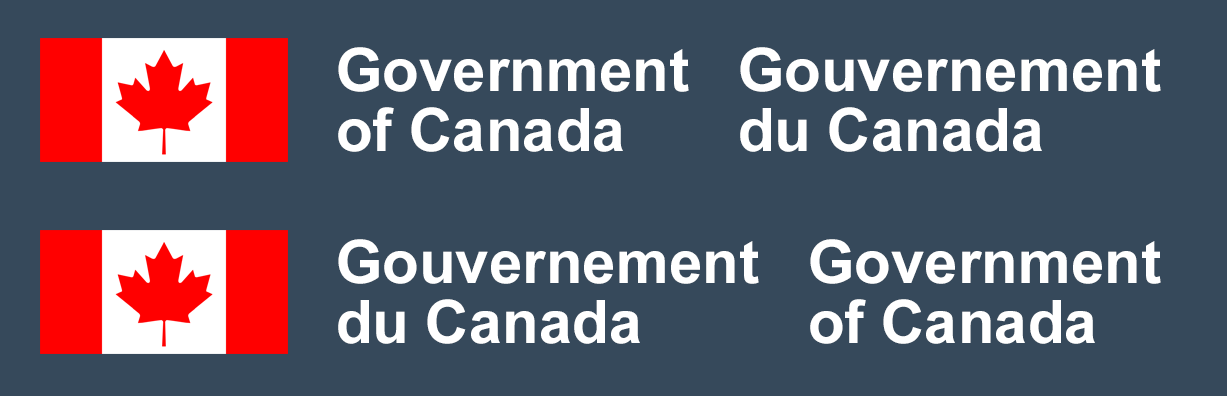
<style>
.page{position:relative;width:1227px;height:396px;background:#36495b}
.page>*{position:absolute;margin:0}
.t1{font:60px/60px "Arial-BoldMT";color:#ffffff}
</style>
<div class="page">
<p class="t1" style="left:338px;top:47px;width:351px;height:105px">Government<br>of Canada</p>
<p class="t1" style="left:740px;top:47px;width:421px;height:105px">Gouvernement<br>du Canada</p>
<p class="t1" style="left:338px;top:239px;width:421px;height:105px">Gouvernement<br>du Canada</p>
<p class="t1" style="left:810px;top:239px;width:351px;height:105px">Government<br>of Canada</p>
</div>
